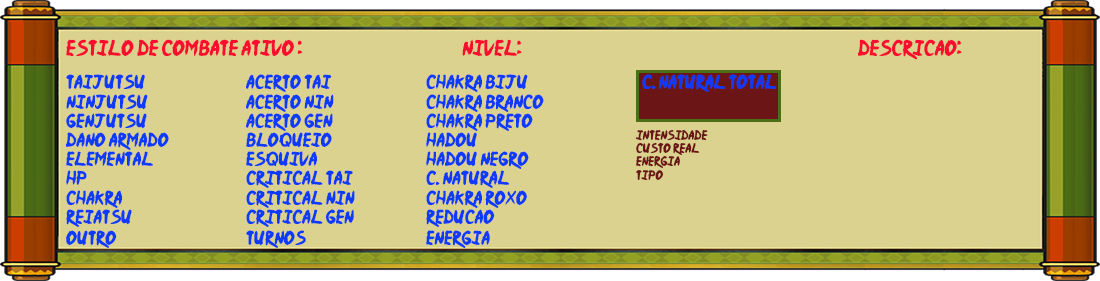
<style>
.page{position:relative;width:1100px;height:281px;background:#dad28e}
.page>*{position:absolute;margin:0}
.t1{font:18px "Ninja-Naruto";color:#fa0e2f}
.t2{font:16px "Ninja-Naruto";color:#0e3afa}
.t3{font:11px "Ninja-Naruto";color:#6b1517}
</style>
<div class="page">
<p class="t1" style="left:66px;top:39px;width:896px;height:21px">eSTILO DE COMBATE aTIVO :     nIVEL:          Descricao:</p>
<p class="t2" style="left:66px;top:74px;width:711px;height:174px">tAIJUTSU   aCERTO TAI   Chakra biju    c. nATURAL tOTAL            <br>nINJUTSU   ACERTO NIN   chakra bRANCO      <br>gENJUTSU   ACERTO GEN   Chakra preto     <br>Dano Armado   Bloqueio   hADOU<br>Elemental   Esquiva    Hadou Negro<br>HP     Critical tai   c. NATURAL<br>Chakra    cRITICAL NIN  cHAKRA rOXO<br>Reiatsu    Critical gen   rEDUCAO<br>oUTRO    tURNOS    Energia</p>
<p class="t3" style="left:635px;top:129px;width:73px;height:52px">Intensidade<br>Custo real<br>energia<br>tIPO</p>
</div>
